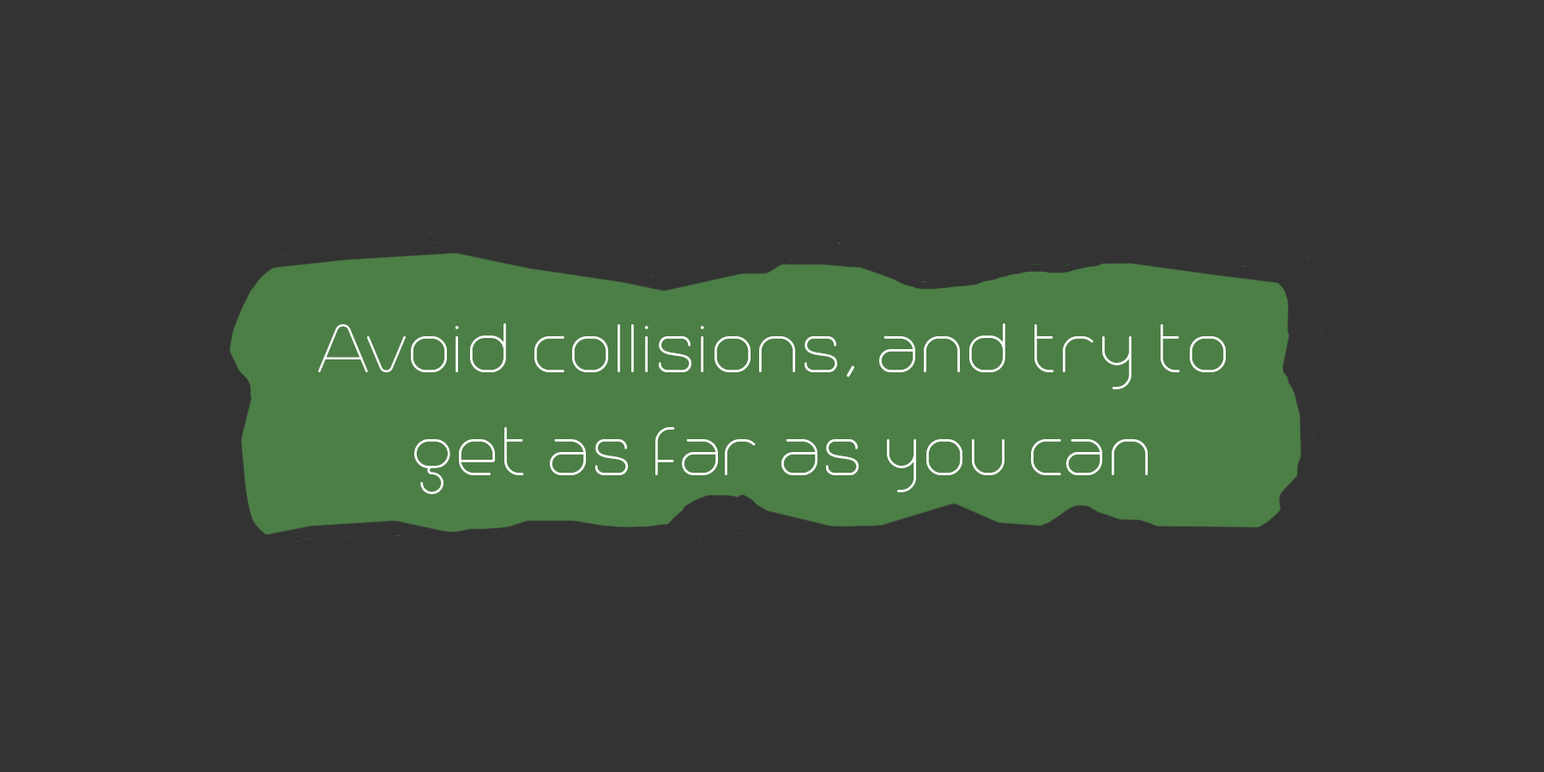
<style>
.page{position:relative;width:1544px;height:772px;background:#333333}
.page>*{position:absolute;margin:0}
.t1{font:85.8px "Trench-Thin";color:#ffffff}
</style>
<div class="page">
<p class="t1" style="left:318px;top:323px;width:908px;height:171px;text-align:center">Avoid collisions, and try to <br>get as far as you can</p>
</div>
